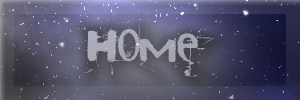
<style>
.page{position:relative;width:300px;height:100px}
.page>*{position:absolute;margin:0}
.t1{font:74.1px "CocaineSans";color:#a8a8b6}
</style>
<div class="page">
<p class="t1" style="left:81px;top:23px;width:138px;height:54px">Home</p>
<p class="t1" style="left:81px;top:23px;width:138px;height:54px">Home</p>
</div>
